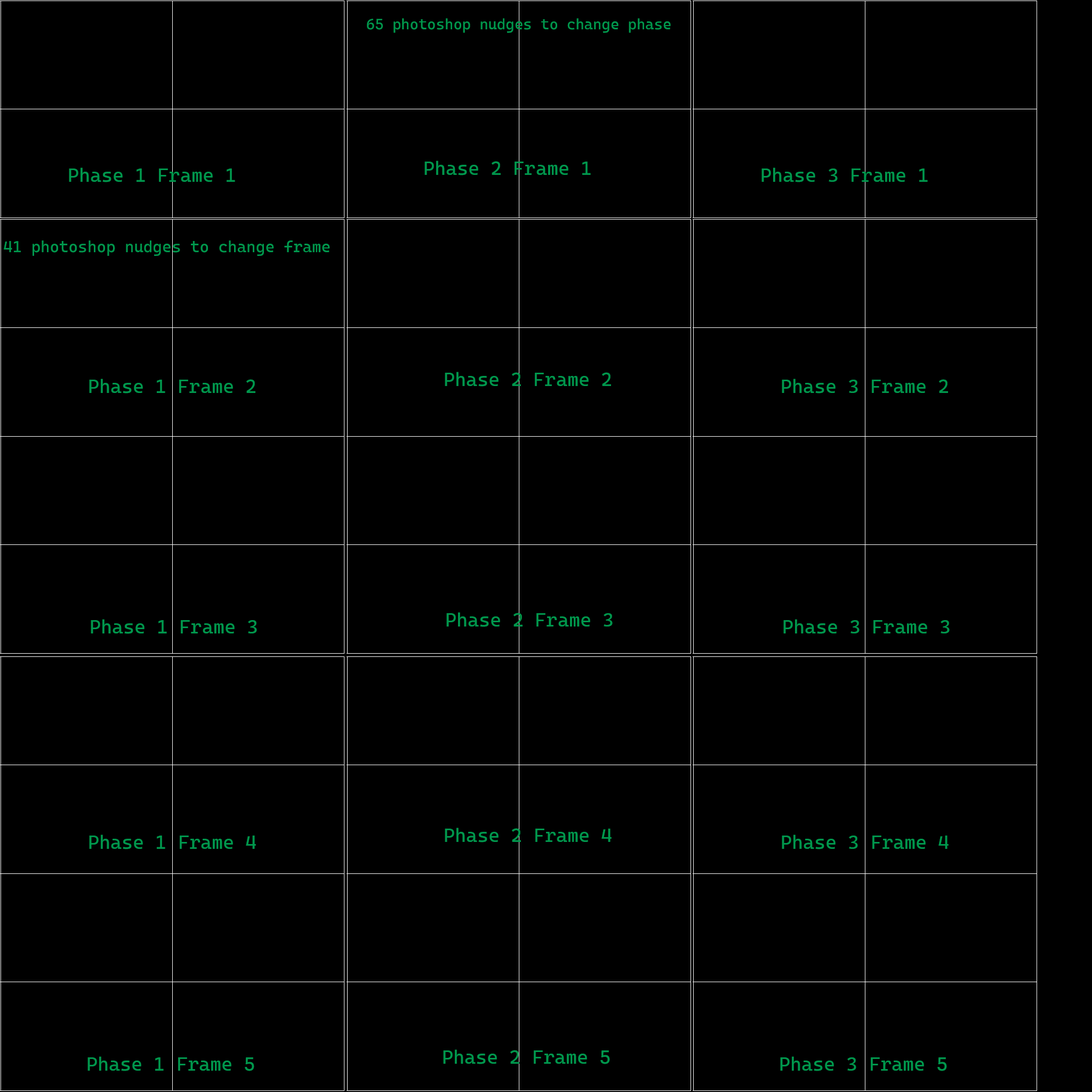
<style>
.page{position:relative;width:1092px;height:1092px;background:#000000}
.page>*{position:absolute;margin:0}
.t1{font:14.9px "CascadiaCode-Roman";color:#00974d}
.t2{font:19.2px "CascadiaCode-Roman";color:#00974d}
.t3{font:16px "CascadiaCode-Roman";color:#00974d}
</style>
<div class="page">
<p class="t1" style="left:367px;top:18px;width:304px;height:15px">65 photoshop nudges to change phase</p>
<p class="t2" style="left:424px;top:160px;width:167px;height:15px">Phase 2 Frame 1</p>
<p class="t2" style="left:69px;top:167px;width:166px;height:15px">Phase 1 Frame 1</p>
<p class="t2" style="left:761px;top:167px;width:167px;height:15px">Phase 3 Frame 1</p>
<p class="t3" style="left:4px;top:240px;width:326px;height:16px">41 photoshop nudges to change frame</p>
<p class="t2" style="left:445px;top:372px;width:166px;height:15px">Phase 2 Frame 2</p>
<p class="t2" style="left:89px;top:379px;width:166px;height:14px">Phase 1 Frame 2</p>
<p class="t2" style="left:782px;top:379px;width:166px;height:14px">Phase 3 Frame 2</p>
<p class="t2" style="left:446px;top:612px;width:167px;height:15px">Phase 2 Frame 3</p>
<p class="t2" style="left:91px;top:619px;width:166px;height:15px">Phase 1 Frame 3</p>
<p class="t2" style="left:783px;top:619px;width:167px;height:15px">Phase 3 Frame 3</p>
<p class="t2" style="left:445px;top:828px;width:167px;height:14px">Phase 2 Frame 4</p>
<p class="t2" style="left:89px;top:834px;width:167px;height:15px">Phase 1 Frame 4</p>
<p class="t2" style="left:782px;top:834px;width:167px;height:15px">Phase 3 Frame 4</p>
<p class="t2" style="left:443px;top:1049px;width:167px;height:15px">Phase 2 Frame 5</p>
<p class="t2" style="left:87px;top:1056px;width:167px;height:15px">Phase 1 Frame 5</p>
<p class="t2" style="left:780px;top:1056px;width:167px;height:15px">Phase 3 Frame 5</p>
</div>
